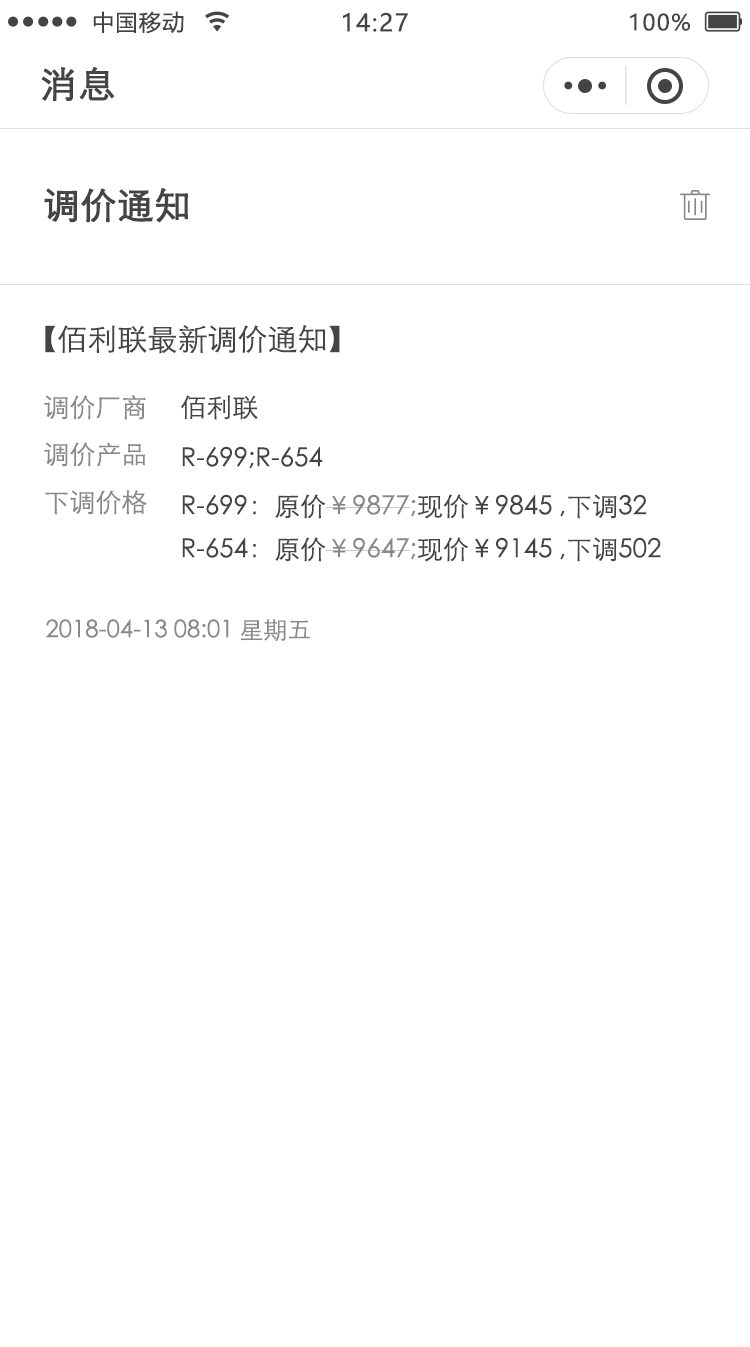
<style>
.page{position:relative;width:750px;height:1347px;background:#ffffff}
.page>*{position:absolute;margin:0}
.t1{font:22px "MicrosoftYaHei";letter-spacing:0.06em;color:#444444}
.t2{font:24px "MicrosoftYaHei";letter-spacing:0.06em;color:#444444}
.t3{font:36px "STXihei";letter-spacing:0.06em;color:#444444;font-weight:bold}
.t4{font:36px "STXihei";color:#444444;font-weight:bold}
.t5{font:30px "STXihei";color:#444444}
.t6{font:26px "STXihei";color:#888888}
.t7{font:26px "STXihei";color:#444444}
.t8{font:24px "STXihei";color:#888888}
</style>
<div class="page">
<p class="t1" style="left:93px;top:11px;width:91px;height:23px">中国移动</p>
<p class="t2" style="left:343px;top:12px;width:65px;height:20px">14:27</p>
<p class="t1" style="left:630px;top:13px;width:60px;height:18px">100%</p>
<p class="t3" style="left:41px;top:67px;width:74px;height:34px">消息</p>
<p class="t4" style="left:44px;top:188px;width:144px;height:35px">调价通知</p>
<p class="t5" style="left:45px;top:325px;width:295px;height:29px">【佰利联最新调价通知】</p>
<p class="t6" style="left:44px;top:395px;width:102px;height:25px">调价厂商</p>
<p class="t7" style="left:181px;top:395px;width:77px;height:25px">佰利联</p>
<p class="t6" style="left:44px;top:442px;width:101px;height:25px">调价产品</p>
<p class="t7" style="left:182px;top:446px;width:141px;height:23px">R-699;R-654</p>
<p class="t6" style="left:45px;top:490px;width:102px;height:25px">下调价格</p>
<p class="t7" style="left:182px;top:494px;width:465px;height:25px">R-699：原价<span class="t6">￥9877;</span>现价￥9845 ,下调32</p>
<p class="t7" style="left:182px;top:537px;width:479px;height:25px">R-654：原价<span class="t6">￥9647;</span>现价￥9145 ,下调502</p>
<p class="t8" style="left:46px;top:619px;width:264px;height:23px">2018-04-13 08:01 星期五</p>
</div>
